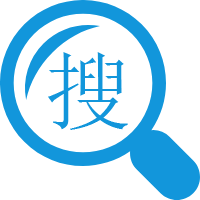
<style>
.page{position:relative;width:200px;height:200px;background:#ffffff}
.page>*{position:absolute;margin:0}
.t1{font:86px "SimSun";color:#1296db}
</style>
<div class="page">
<p class="t1" style="left:48px;top:52px;width:80px;height:78px">搜</p>
</div>
